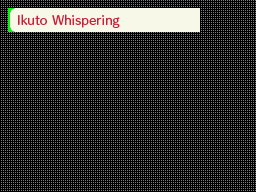
<style>
.page{position:relative;width:256px;height:192px;background:#000000}
.page>*{position:absolute;margin:0}
.t1{font:11.4px "HummingStd-D";letter-spacing:0.025em;color:#c82038}
</style>
<div class="page">
<p class="t1" style="left:18px;top:14px;width:102px;height:14px">Ikuto Whispering</p>
</div>
